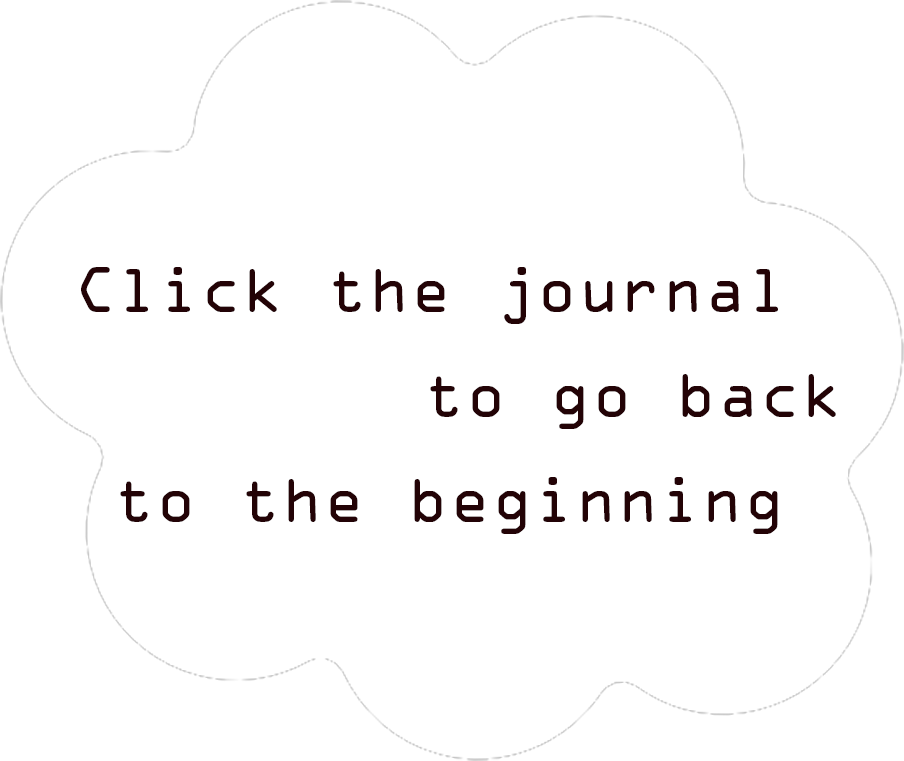
<style>
.page{position:relative;width:904px;height:761px;background:#ffffff}
.page>*{position:absolute;margin:0}
.t1{font:58.3px "OCRAStd";color:#230306}
</style>
<div class="page">
<p class="t1" style="left:81px;top:267px;width:697px;height:57px">Click the journal</p>
<p class="t1" style="left:430px;top:374px;width:406px;height:55px">to go back</p>
<p class="t1" style="left:120px;top:477px;width:658px;height:57px">to the beginning</p>
</div>
